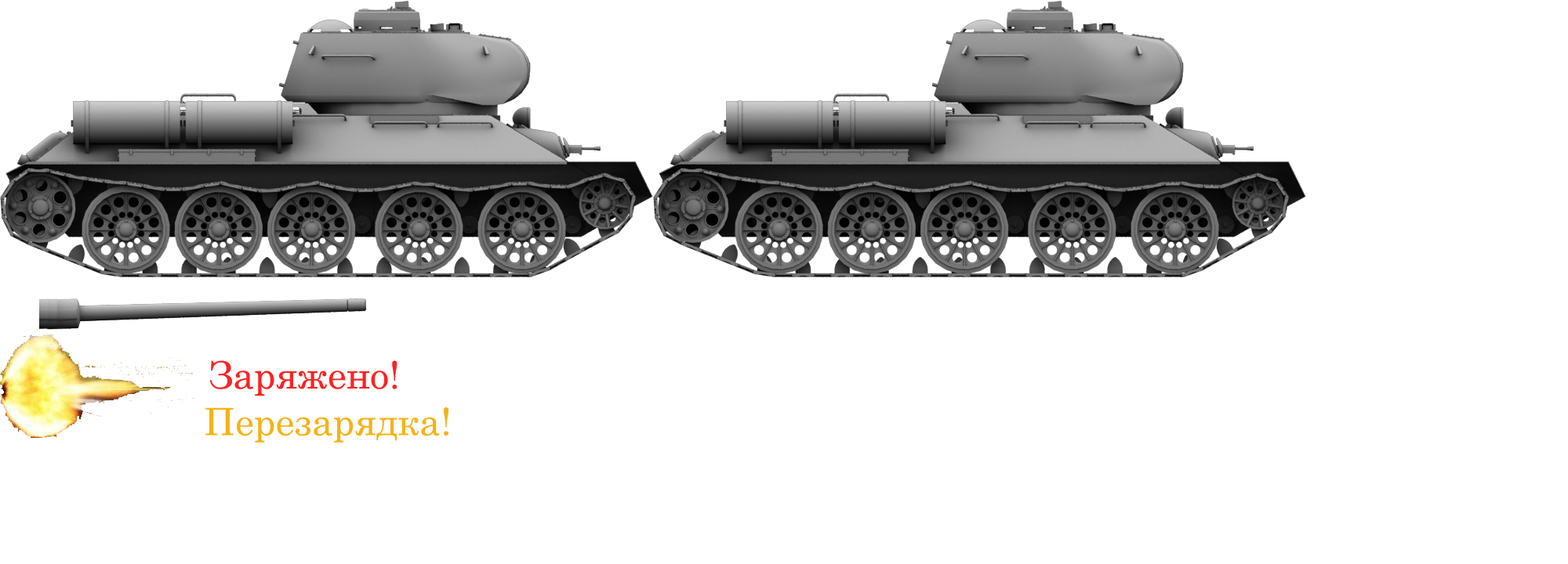
<style>
.page{position:relative;width:1568px;height:564px;background:#ffffff}
.page>*{position:absolute;margin:0}
.t1{font:37.6px "CenturySchoolbook";color:#fa2424}
.t2{font:37.6px "CenturySchoolbook";color:#f4b318}
</style>
<div class="page">
<p class="t1" style="left:210px;top:361px;width:187px;height:36px">Заряжено!</p>
<p class="t2" style="left:205px;top:407px;width:244px;height:36px">Перезарядка!</p>
</div>
